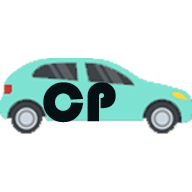
<style>
.page{position:relative;width:192px;height:192px;background:#ffffff}
.page>*{position:absolute;margin:0}
.t1{font:56.8px "Bauhaus93";color:#051014}
</style>
<div class="page">
<p class="t1" style="left:43px;top:82px;width:73px;height:41px">CP</p>
</div>
